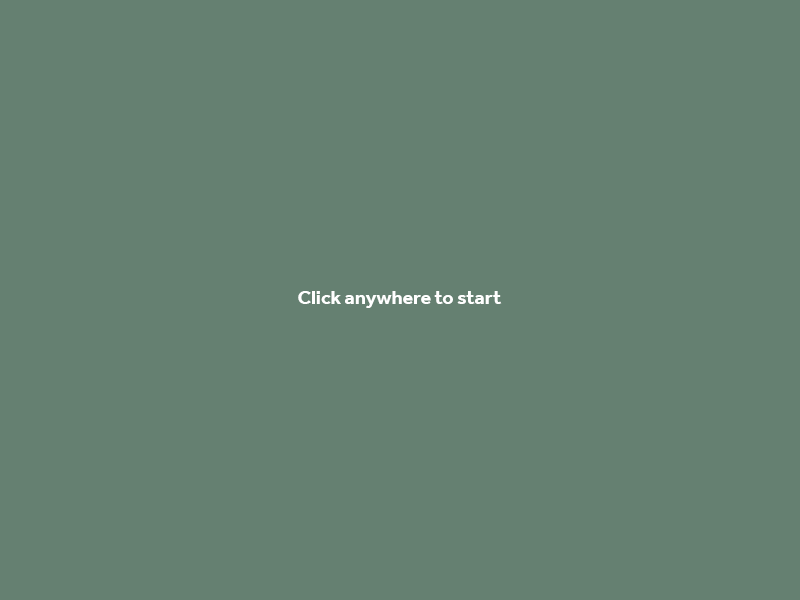
<style>
.page{position:relative;width:800px;height:600px;background:#658071}
.page>*{position:absolute;margin:0}
.t1{font:19.7px "Effra-Bold";color:#ffffff}
</style>
<div class="page">
<p class="t1" style="left:298px;top:291px;width:204px;height:17px">Click anywhere to start</p>
</div>
